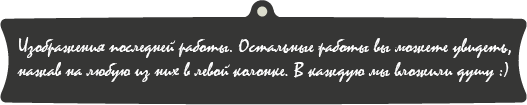
<style>
.page{position:relative;width:527px;height:105px;background:#363635}
.page>*{position:absolute;margin:0}
.t1{font:20px "Mistral";color:#ffffff}
</style>
<div class="page">
<p class="t1" style="left:17px;top:37px;width:494px;height:45px;text-align:right">Изображения последней работы. Остальные работы вы можете увидеть, нажав на любую из них в левой колонке. В каждую мы вложили душу :)</p>
</div>
